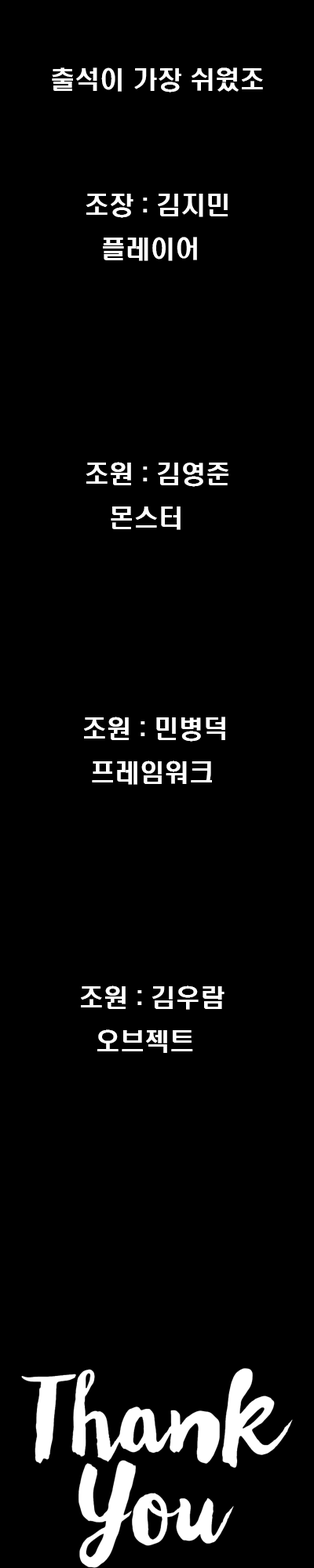
<style>
.page{position:relative;width:314px;height:1568px;background:#000000}
.page>*{position:absolute;margin:0}
.t1{font:9.4px "H2hdrM";color:#ffffff}
</style>
<div class="page">
<p class="t1" style="left:52px;top:67px;width:211px;height:26px">출석이 가장 쉬웠조</p>
<p class="t1" style="left:86px;top:194px;width:141px;height:67px">조장 : 김지민<br>  플레이어</p>
<p class="t1" style="left:86px;top:462px;width:142px;height:68px">조원 : 김영준<br>   몬스터</p>
<p class="t1" style="left:84px;top:717px;width:141px;height:68px">조원 : 민병덕<br> 프레임워크</p>
<p class="t1" style="left:81px;top:985px;width:143px;height:68px">조원 : 김우람<br>  오브젝트</p>
</div>
